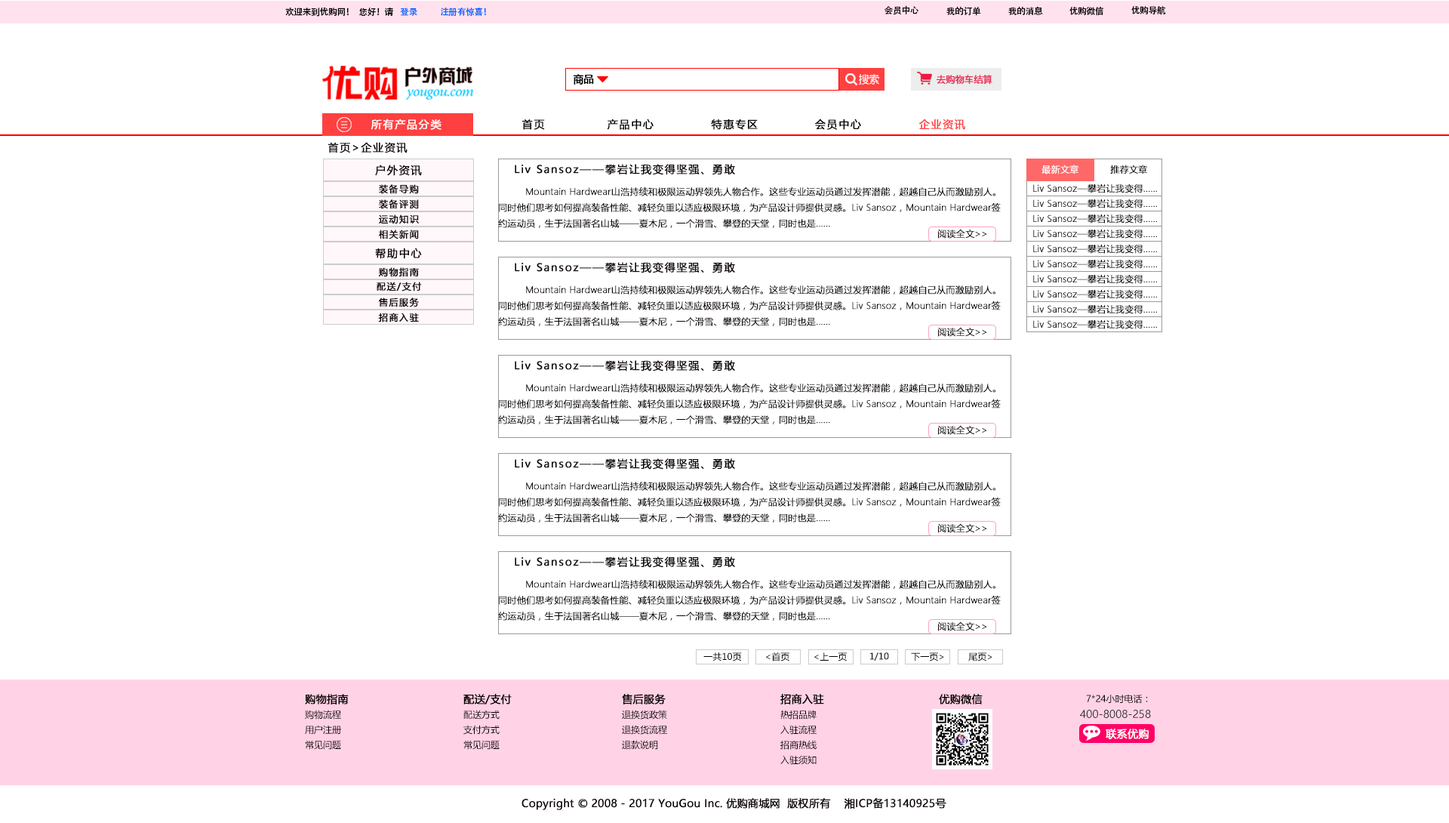
<style>
.page{position:relative;width:1449px;height:823px;background:#ffffff}
.page>*{position:absolute;margin:0}
.t1{font:8.8px "AdobeHeitiStd-Regular";letter-spacing:-0.025em;color:#000000}
.t2{font:8.8px "AdobeHeitiStd-Regular";letter-spacing:-0.025em;color:#0066ff}
.t3{font:8.8px "AdobeHeitiStd-Regular";letter-spacing:-0.025em;color:#010000}
.t4{font:10.6px "MicrosoftYaHei-Bold";letter-spacing:-0.025em;color:#000000}
.t5{font:10.6px "MicrosoftYaHeiLight";letter-spacing:-0.025em;color:#ffffff}
.t6{font:9.1px "MicrosoftYaHei";color:#e72d56;font-weight:bold}
.t7{font:10.6px "MicrosoftYaHei";letter-spacing:0.1em;color:#ffffff;font-weight:bold}
.t8{font:10.6px "MicrosoftYaHei";letter-spacing:0.1em;color:#000000;font-weight:bold}
.t9{font:10.6px "MicrosoftYaHei";letter-spacing:0.1em;color:#010101;font-weight:bold}
.t10{font:10.6px "MicrosoftYaHei";letter-spacing:0.1em;color:#ff4040;font-weight:bold}
.t11{font:10.6px "MicrosoftYaHei";letter-spacing:0.1em;color:#0e050a;font-weight:bold}
.t12{font:9.1px "MicrosoftYaHeiLight";color:#fefefe;font-weight:bold}
.t13{font:9.1px "MicrosoftYaHeiLight";color:#0e050a;font-weight:bold}
.t14{font:9.1px "MicrosoftYaHei";letter-spacing:0.1em;color:#0e050a;font-weight:bold}
.t15{font:9.1px "MicrosoftYaHeiLight";color:#000000;font-weight:bold}
.t16{font:9.1px "MicrosoftYaHei";color:#000000}
.t17{font:10.6px "MicrosoftYaHei";color:#040000;font-weight:bold}
.t18{font:9.1px "MicrosoftYaHei";color:#040000}
.t19{font:10.6px "MicrosoftYaHei";color:#323333}
.t20{font:10.6px "MicrosoftYaHei";color:#ffffff;font-weight:bold}
.t21{font:10.6px "MicrosoftYaHei";color:#0e050a;font-weight:bold}
</style>
<div class="page">
<p class="t1" style="left:885px;top:5px;width:34px;height:10px">会员中心</p>
<p class="t1" style="left:285px;top:8px;width:64px;height:9px">欢迎来到优购网！</p>
<p class="t2" style="left:359px;top:7px;width:127px;height:10px"><span class="t3">您好！请   </span> 登录 注册有惊喜！</p>
<p class="t1" style="left:947px;top:6px;width:34px;height:10px">我的订单</p>
<p class="t1" style="left:1008px;top:6px;width:35px;height:9px">我的消息</p>
<p class="t1" style="left:1070px;top:6px;width:34px;height:10px">优购微信</p>
<p class="t1" style="left:1132px;top:6px;width:34px;height:9px">优购导航</p>
<p class="t4" style="left:574px;top:74px;width:20px;height:11px">商品</p>
<p class="t5" style="left:859px;top:74px;width:20px;height:11px">搜索</p>
<p class="t6" style="left:937px;top:75px;width:56px;height:10px">去购物车结算</p>
<p class="t7" style="left:371px;top:119px;width:71px;height:11px">所有产品分类</p>
<p class="t8" style="left:522px;top:119px;width:23px;height:11px">首页</p>
<p class="t9" style="left:607px;top:119px;width:47px;height:11px">产品中心</p>
<p class="t8" style="left:711px;top:119px;width:47px;height:11px">特惠专区</p>
<p class="t8" style="left:815px;top:119px;width:46px;height:11px">会员中心</p>
<p class="t10" style="left:919px;top:119px;width:46px;height:11px">企业资讯</p>
<p class="t8" style="left:328px;top:142px;width:80px;height:11px">首页&gt;企业资讯</p>
<p class="t11" style="left:375px;top:165px;width:47px;height:11px">户外资讯</p>
<p class="t11" style="left:515px;top:164px;width:220px;height:11px">Liv Sansoz——攀岩让我变得坚强、勇敢</p>
<p class="t12" style="left:1042px;top:165px;width:37px;height:9px">最新文章</p>
<p class="t13" style="left:1110px;top:165px;width:38px;height:9px">推荐文章</p>
<p class="t14" style="left:379px;top:184px;width:40px;height:10px">装备导购</p>
<p class="t13" style="left:1033px;top:183px;width:124px;height:10px">Liv Sansoz—攀岩让我变得......</p>
<p class="t15" style="left:498px;top:187px;width:503px;height:41px">Mountain Hardwear山浩持续和极限运动界领先人物合作。这些专业运动员通过发挥潜能，超越自己从而激励别人。<br>同时他们思考如何提高装备性能、减轻负重以适应极限环境，为产品设计师提供灵感。Liv Sansoz，Mountain Hardwear签<br>约运动员，生于法国著名山城——夏木尼，一个滑雪、攀登的天堂，同时也是......</p>
<p class="t14" style="left:379px;top:199px;width:40px;height:10px">装备评测</p>
<p class="t13" style="left:1033px;top:199px;width:124px;height:9px">Liv Sansoz—攀岩让我变得......</p>
<p class="t14" style="left:379px;top:214px;width:40px;height:10px">运动知识</p>
<p class="t13" style="left:1033px;top:214px;width:124px;height:9px">Liv Sansoz—攀岩让我变得......</p>
<p class="t14" style="left:379px;top:229px;width:40px;height:10px">相关新闻</p>
<p class="t13" style="left:938px;top:229px;width:49px;height:10px">阅读全文&gt;&gt;</p>
<p class="t13" style="left:1033px;top:229px;width:124px;height:10px">Liv Sansoz—攀岩让我变得......</p>
<p class="t13" style="left:1033px;top:244px;width:124px;height:10px">Liv Sansoz—攀岩让我变得......</p>
<p class="t11" style="left:375px;top:248px;width:47px;height:11px">帮助中心</p>
<p class="t14" style="left:378px;top:267px;width:41px;height:10px">购物指南</p>
<p class="t11" style="left:515px;top:262px;width:220px;height:11px">Liv Sansoz——攀岩让我变得坚强、勇敢</p>
<p class="t13" style="left:1033px;top:259px;width:124px;height:10px">Liv Sansoz—攀岩让我变得......</p>
<p class="t14" style="left:377px;top:282px;width:45px;height:9px">配送/支付</p>
<p class="t13" style="left:1033px;top:274px;width:124px;height:10px">Liv Sansoz—攀岩让我变得......</p>
<p class="t15" style="left:498px;top:285px;width:503px;height:41px">Mountain Hardwear山浩持续和极限运动界领先人物合作。这些专业运动员通过发挥潜能，超越自己从而激励别人。<br>同时他们思考如何提高装备性能、减轻负重以适应极限环境，为产品设计师提供灵感。Liv Sansoz，Mountain Hardwear签<br>约运动员，生于法国著名山城——夏木尼，一个滑雪、攀登的天堂，同时也是......</p>
<p class="t13" style="left:1033px;top:289px;width:124px;height:10px">Liv Sansoz—攀岩让我变得......</p>
<p class="t14" style="left:378px;top:297px;width:41px;height:10px">售后服务</p>
<p class="t13" style="left:1033px;top:304px;width:124px;height:10px">Liv Sansoz—攀岩让我变得......</p>
<p class="t14" style="left:378px;top:313px;width:41px;height:9px">招商入驻</p>
<p class="t13" style="left:938px;top:327px;width:49px;height:10px">阅读全文&gt;&gt;</p>
<p class="t13" style="left:1033px;top:319px;width:124px;height:10px">Liv Sansoz—攀岩让我变得......</p>
<p class="t11" style="left:515px;top:360px;width:220px;height:11px">Liv Sansoz——攀岩让我变得坚强、勇敢</p>
<p class="t15" style="left:498px;top:383px;width:503px;height:41px">Mountain Hardwear山浩持续和极限运动界领先人物合作。这些专业运动员通过发挥潜能，超越自己从而激励别人。<br>同时他们思考如何提高装备性能、减轻负重以适应极限环境，为产品设计师提供灵感。Liv Sansoz，Mountain Hardwear签<br>约运动员，生于法国著名山城——夏木尼，一个滑雪、攀登的天堂，同时也是......</p>
<p class="t13" style="left:938px;top:425px;width:49px;height:10px">阅读全文&gt;&gt;</p>
<p class="t11" style="left:515px;top:458px;width:220px;height:12px">Liv Sansoz——攀岩让我变得坚强、勇敢</p>
<p class="t15" style="left:498px;top:482px;width:503px;height:40px">Mountain Hardwear山浩持续和极限运动界领先人物合作。这些专业运动员通过发挥潜能，超越自己从而激励别人。<br>同时他们思考如何提高装备性能、减轻负重以适应极限环境，为产品设计师提供灵感。Liv Sansoz，Mountain Hardwear签<br>约运动员，生于法国著名山城——夏木尼，一个滑雪、攀登的天堂，同时也是......</p>
<p class="t13" style="left:938px;top:523px;width:49px;height:10px">阅读全文&gt;&gt;</p>
<p class="t11" style="left:515px;top:556px;width:220px;height:12px">Liv Sansoz——攀岩让我变得坚强、勇敢</p>
<p class="t15" style="left:498px;top:580px;width:503px;height:40px">Mountain Hardwear山浩持续和极限运动界领先人物合作。这些专业运动员通过发挥潜能，超越自己从而激励别人。<br>同时他们思考如何提高装备性能、减轻负重以适应极限环境，为产品设计师提供灵感。Liv Sansoz，Mountain Hardwear签<br>约运动员，生于法国著名山城——夏木尼，一个滑雪、攀登的天堂，同时也是......</p>
<p class="t13" style="left:938px;top:621px;width:49px;height:10px">阅读全文&gt;&gt;</p>
<p class="t16" style="left:704px;top:652px;width:38px;height:9px">一共10页</p>
<p class="t16" style="left:766px;top:652px;width:24px;height:9px">&lt;首页</p>
<p class="t16" style="left:814px;top:652px;width:33px;height:9px">&lt;上一页</p>
<p class="t16" style="left:870px;top:652px;width:19px;height:8px">1/10</p>
<p class="t16" style="left:911px;top:652px;width:33px;height:9px">下一页&gt;</p>
<p class="t16" style="left:968px;top:652px;width:25px;height:9px">尾页&gt;</p>
<p class="t17" style="left:305px;top:694px;width:44px;height:10px">购物指南</p>
<p class="t17" style="left:463px;top:694px;width:49px;height:10px">配送/支付</p>
<p class="t17" style="left:622px;top:694px;width:44px;height:10px">售后服务</p>
<p class="t17" style="left:781px;top:694px;width:43px;height:10px">招商入驻</p>
<p class="t17" style="left:939px;top:694px;width:44px;height:10px">优购微信</p>
<p class="t18" style="left:1086px;top:694px;width:62px;height:10px">7*24小时电话：</p>
<p class="t18" style="left:305px;top:710px;width:36px;height:9px">购物流程</p>
<p class="t18" style="left:463px;top:710px;width:37px;height:9px">配送方式</p>
<p class="t18" style="left:622px;top:710px;width:45px;height:9px">退换货政策</p>
<p class="t18" style="left:781px;top:710px;width:36px;height:9px">热招品牌</p>
<p class="t19" style="left:1080px;top:710px;width:71px;height:8px">400-8008-258</p>
<p class="t18" style="left:305px;top:725px;width:36px;height:9px">用户注册</p>
<p class="t18" style="left:463px;top:725px;width:37px;height:9px">支付方式</p>
<p class="t18" style="left:622px;top:725px;width:45px;height:9px">退换货流程</p>
<p class="t18" style="left:781px;top:725px;width:36px;height:9px">入驻流程</p>
<p class="t20" style="left:1106px;top:728px;width:43px;height:11px">联系优购</p>
<p class="t18" style="left:305px;top:740px;width:36px;height:10px">常见问题</p>
<p class="t18" style="left:463px;top:740px;width:37px;height:10px">常见问题</p>
<p class="t18" style="left:622px;top:740px;width:36px;height:10px">退款说明</p>
<p class="t18" style="left:781px;top:740px;width:36px;height:10px">招商热线</p>
<p class="t18" style="left:781px;top:755px;width:36px;height:10px">入驻须知</p>
<p class="t21" style="left:522px;top:797px;width:425px;height:13px">Copyright © 2008 - 2017 YouGou Inc. 优购商城网  版权所有    湘ICP备13140925号</p>
</div>
